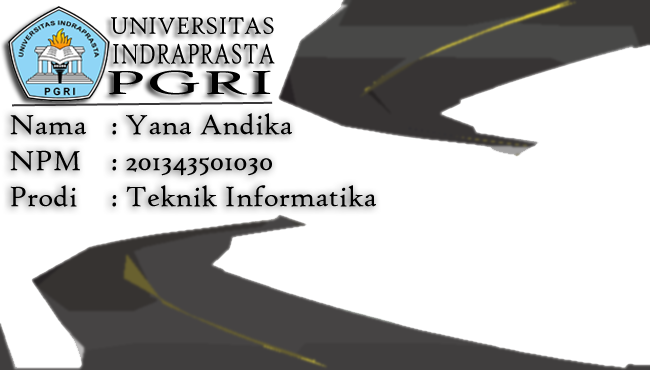
<style>
.page{position:relative;width:650px;height:370px;background:#ffffff}
.page>*{position:absolute;margin:0}
.t1{font:30px "HighTowerText-Reg";color:#000000}
</style>
<div class="page">
<p class="t1" style="left:10px;top:113px;width:366px;height:94px">Nama : Yana Andika<br>NPM : 201343501030<br>Prodi : Teknik Informatika</p>
</div>
